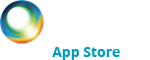
<style>
.page{position:relative;width:150px;height:60px;background:#ffffff}
.page>*{position:absolute;margin:0}
.t1{font:14px "OpenSans-Bold";color:#019cbd}
</style>
<div class="page">
<p class="t1" style="left:52px;top:47px;width:68px;height:13px">App Store</p>
</div>
